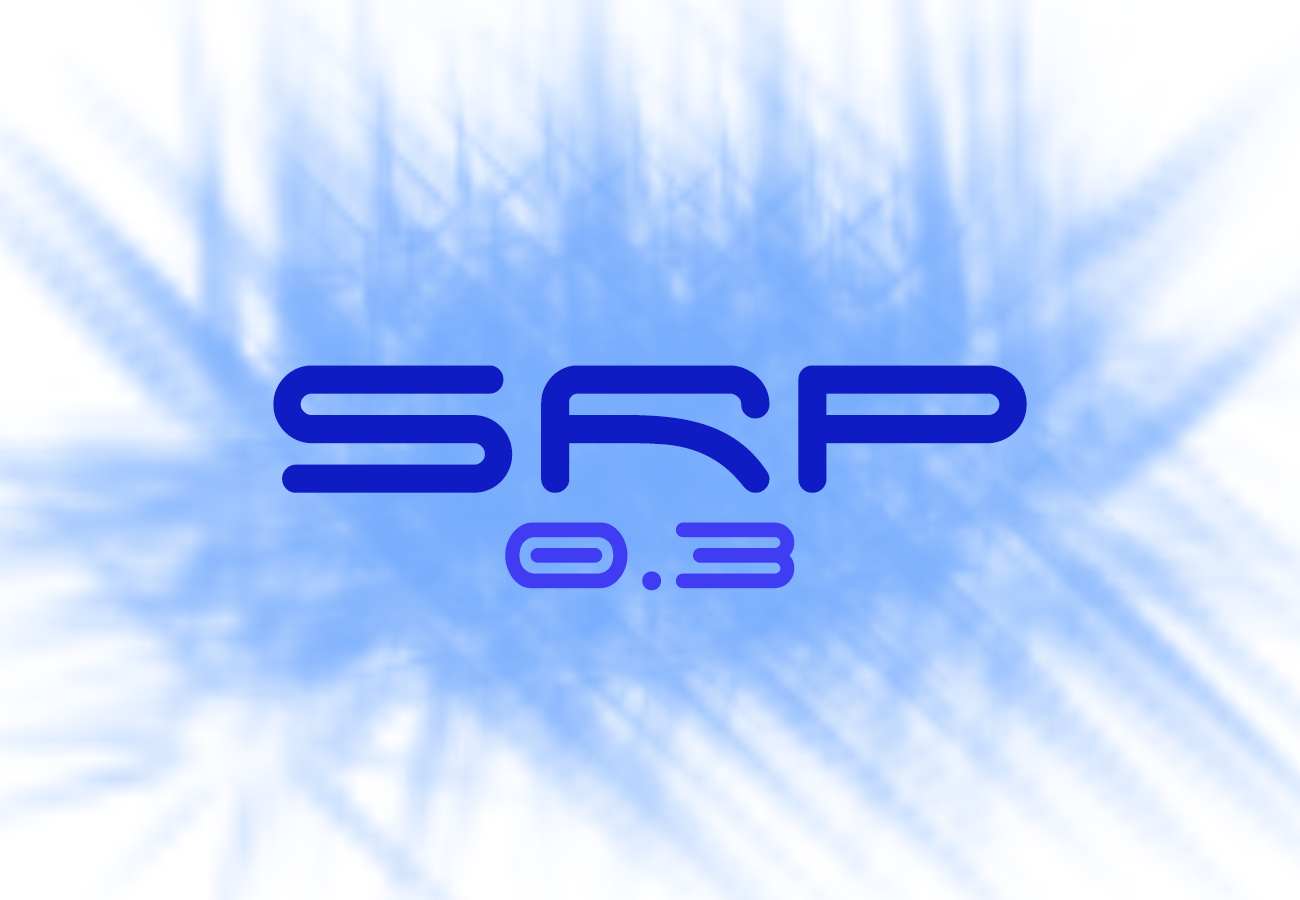
<style>
.page{position:relative;width:1300px;height:900px}
.page>*{position:absolute;margin:0}
.t1{font:291.7px "SpaceAge";color:#0f1cc4}
.t2{font:150px "SpaceAge";color:#403cf1}
</style>
<div class="page">
<p class="t1" style="left:273px;top:365px;width:754px;height:128px">SRP</p>
<p class="t2" style="left:505px;top:522px;width:290px;height:69px">0.3</p>
</div>
